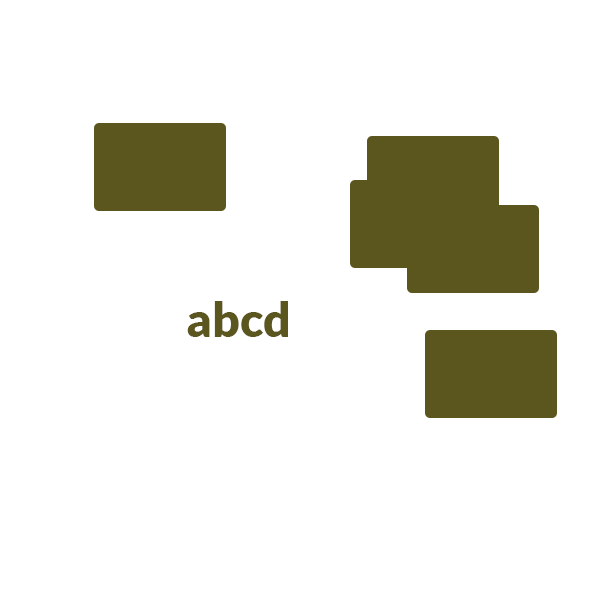
<style>
.page{position:relative;width:600px;height:600px;background:#ffffff}
.page>*{position:absolute;margin:0}
.t1{font:48px "Lato-Black";color:#5b551e}
</style>
<div class="page">
<p class="t1" style="left:187px;top:301px;width:101px;height:36px">abcd</p>
</div>
